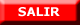
<style>
.page{position:relative;width:80px;height:25px;background:#ff0000}
.page>*{position:absolute;margin:0}
.t1{font:12px "Verdana-Bold";color:#ffffff}
</style>
<div class="page">
<p class="t1" style="left:18px;top:7px;width:42px;height:10px">SALIR</p>
</div>
